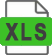
<style>
.page{position:relative;width:52px;height:55px;background:#3dc127}
.page>*{position:absolute;margin:0}
.t1{font:24.3px "Arial-BoldMT";letter-spacing:0.1em;color:#3f3f3f;font-weight:bold;scale:0.77 1}
</style>
<div class="page">
<p class="t1" style="left:5px;top:23px;width:42px;height:18px">XLS</p>
</div>
